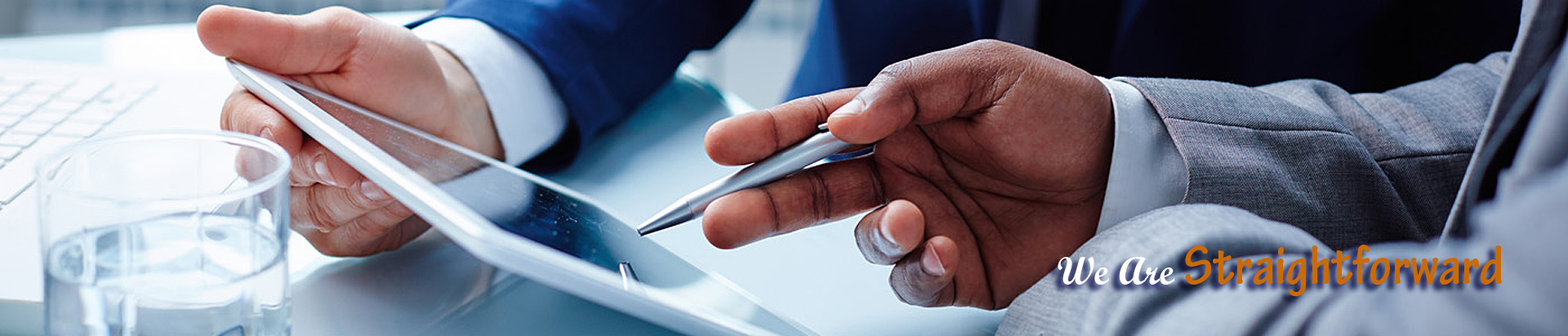
<style>
.page{position:relative;width:1568px;height:336px}
.page>*{position:absolute;margin:0}
.t1{font:58.8px "TektonPro-BoldCond";color:#cc6a02}
.t2{font:39.2px "ScriptMTBold";color:#ffffff}
</style>
<div class="page">
<p class="t1" style="left:1058px;top:245px;width:444px;height:52px"><span class="t2">We Are </span>Straightforward</p>
</div>
